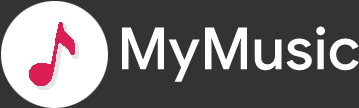
<style>
.page{position:relative;width:359px;height:108px;background:#333333}
.page>*{position:absolute;margin:0}
.t1{font:58.3px "GoogleSans-Medium";color:#ffffff}
</style>
<div class="page">
<p class="t1" style="left:122px;top:26px;width:237px;height:56px">MyMusic</p>
</div>
